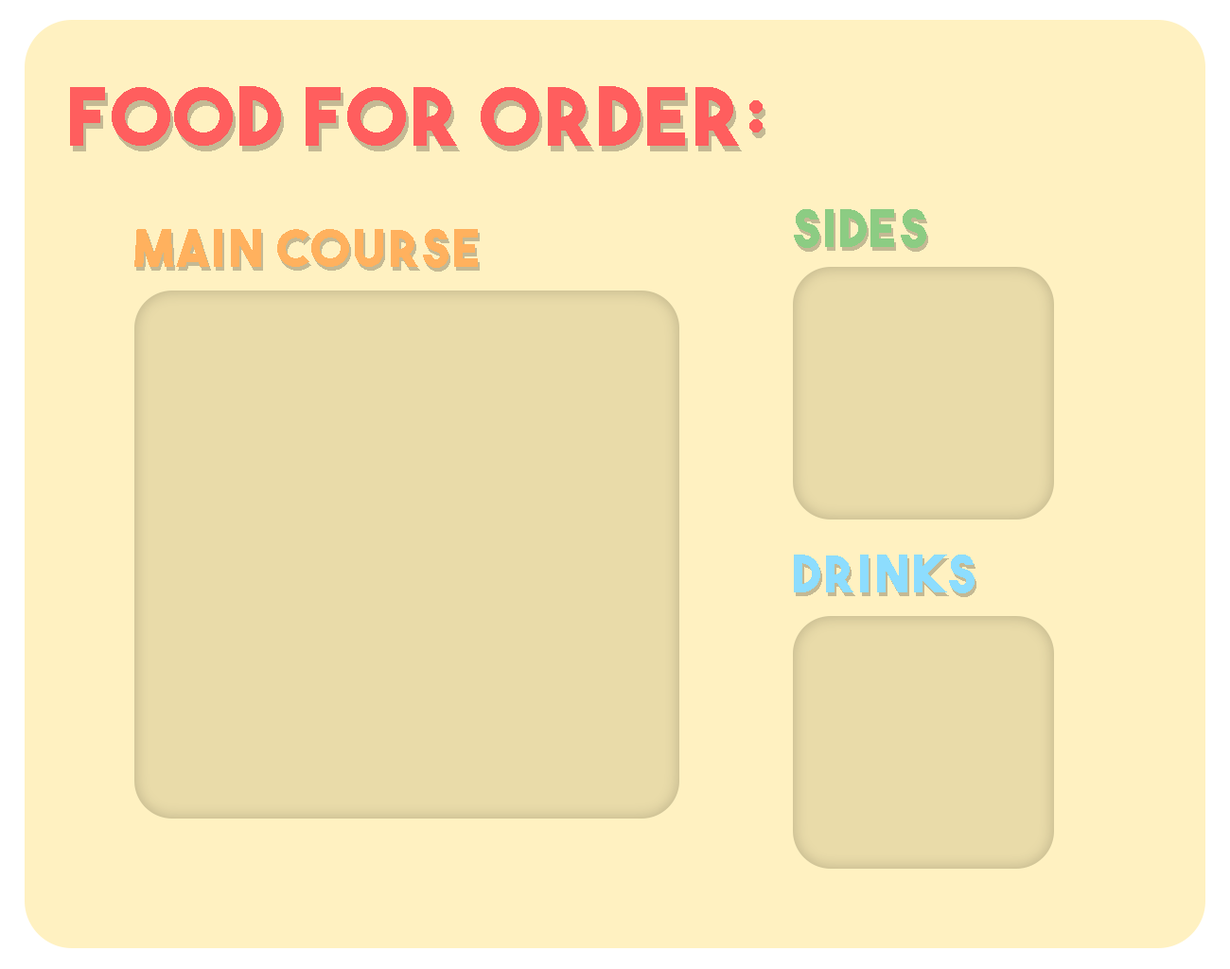
<style>
.page{position:relative;width:1230px;height:969px;background:#fff1c1}
.page>*{position:absolute;margin:0}
.t1{font:80.2px "TheBoldFont";letter-spacing:0.05em;color:#ff5e5e}
.t2{font:51.3px "TheBoldFont";letter-spacing:0.05em;color:#8ccc83}
.t3{font:51.3px "TheBoldFont";letter-spacing:0.05em;color:#ffb15e}
.t4{font:51.3px "TheBoldFont";letter-spacing:0.05em;color:#8dddfe}
</style>
<div class="page">
<p class="t1" style="left:70px;top:86px;width:693px;height:60px">Food for order:</p>
<p class="t2" style="left:794px;top:209px;width:133px;height:39px">Sides</p>
<p class="t3" style="left:134px;top:229px;width:344px;height:39px">Main course</p>
<p class="t4" style="left:794px;top:555px;width:181px;height:38px">drinks</p>
</div>
